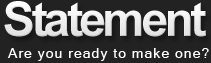
<style>
.page{position:relative;width:211px;height:63px;background:#222222}
.page>*{position:absolute;margin:0}
.t1{font:48px "Arial-BoldMT";letter-spacing:-0.075em;color:#ffffff}
.t2{font:14px "MicrosoftSansSerif";letter-spacing:0.075em;color:#ffffff}
</style>
<div class="page">
<p class="t1" style="left:4px;top:1px;width:202px;height:36px">Statement</p>
<p class="t2" style="left:7px;top:48px;width:202px;height:13px">Are you ready to make one?</p>
</div>
